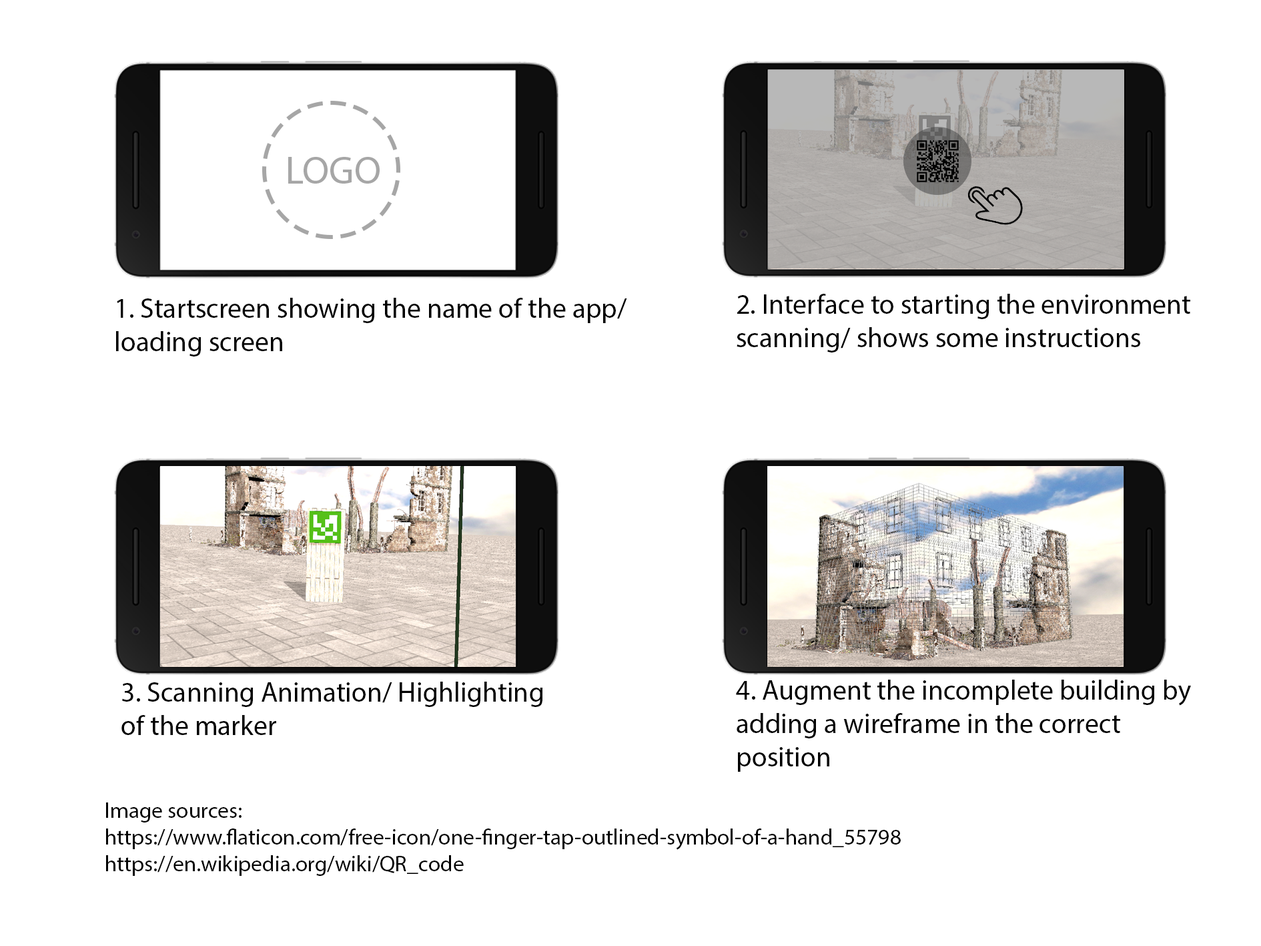
<style>
.page{position:relative;width:1261px;height:946px;background:#ffffff}
.page>*{position:absolute;margin:0}
.t1{font:27.8px "MyriadPro-Regular";color:#000000}
.t2{font:22.2px "MyriadPro-Regular";color:#000000}
</style>
<div class="page">
<p class="t1" style="left:737px;top:294px;width:453px;height:58px">2. Interface to starting the environment <br>scanning/ shows some instructions</p>
<p class="t1" style="left:116px;top:298px;width:511px;height:58px">1. Startscreen showing the name of the app/<br>loading screen</p>
<p class="t1" style="left:121px;top:681px;width:422px;height:54px">3. Scanning Animation/ Highlighting<br>of the marker</p>
<p class="t1" style="left:736px;top:679px;width:455px;height:92px">4. Augment the incomplete building by<br>adding a wireframe in the correct<br>position</p>
<p class="t2" style="left:106px;top:802px;width:795px;height:73px">Image sources:<br>https://www.flaticon.com/free-icon/one-finger-tap-outlined-symbol-of-a-hand_55798<br>https://en.wikipedia.org/wiki/QR_code</p>
</div>
